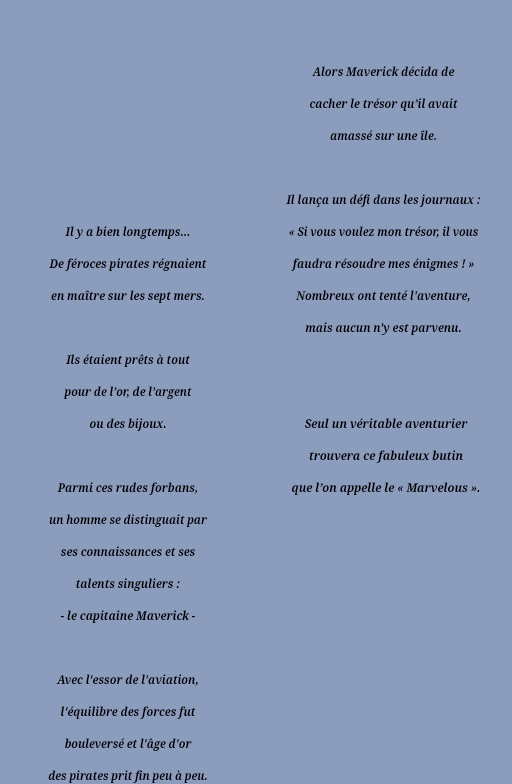
<style>
.page{position:relative;width:512px;height:784px;background:#8c9cbd}
.page>*{position:absolute;margin:0}
.t1{font:12.1px/32px "NotoSerif-BoldItalic";color:#000000;scale:0.9 1}
.t2{font:12.1px/32px "NotoSerif-BoldItalic";color:#000000;scale:0.89 1}
.t3{font:12.1px/32px "NotoSerif-BoldItalic";color:#000000;scale:0.91 1}
.t4{font:12.1px/32px "NotoSerif-BoldItalic";color:#000000;scale:0.93 1}
</style>
<div class="page">
<p class="t1" style="left:286px;top:66px;width:194px;height:269px;text-align:center">Alors Maverick décida de<br>cacher le trésor qu’il avait<br>amassé sur une île.<br><br>Il lança un défi dans les journaux :<br><span class="t2">« Si vous voulez mon trésor, il vous<br></span>faudra résoudre mes énigmes ! »<br>Nombreux ont tenté l'aventure,<br>mais aucun n'y est parvenu.</p>
<p class="t1" style="left:48px;top:226px;width:159px;height:557px;text-align:center">Il y a bien longtemps...<br>De féroces pirates régnaient<br>en maître sur les sept mers.<br><br>Ils étaient prêts à tout<br><span class="t2">pour de l’or, de l’argent<br></span>ou des bijoux.<br><br>Parmi ces rudes forbans,<br><span class="t2">un homme se distinguait par<br></span>ses connaissances et ses<br>talents singuliers :<br><span class="t3">- le capitaine Maverick -<br></span><br>Avec l'essor de l'aviation,<br>l'équilibre des forces fut<br><span class="t2">bouleversé et l'âge d'or<br>des pirates prit fin peu à peu.</span></p>
<p class="t4" style="left:292px;top:418px;width:188px;height:77px;text-align:center">Seul un véritable aventurier<br>trouvera ce fabuleux butin<br>que l’on appelle le « Marvelous ».</p>
</div>
